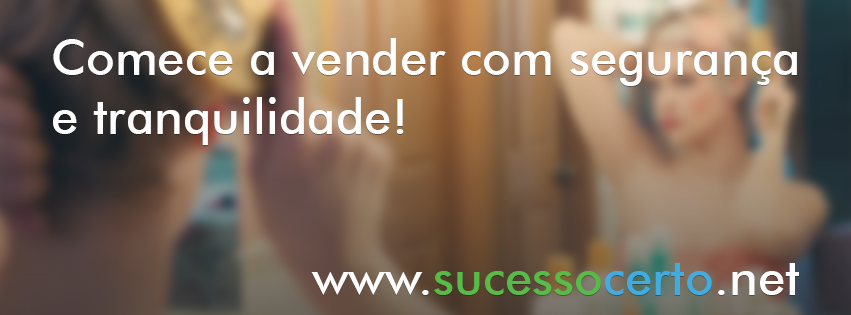
<style>
.page{position:relative;width:851px;height:315px}
.page>*{position:absolute;margin:0}
.t1{font:49px "FuturaBT-Medium";color:#fffefe}
.t2{font:49px "FuturaBT-Medium";color:#58ba47}
.t3{font:49px "FuturaBT-Medium";color:#42abe0}
</style>
<div class="page">
<p class="t1" style="left:53px;top:38px;width:744px;height:107px">Comece a vender com segurança<br>e tranquilidade!</p>
<p class="t2" style="left:311px;top:263px;width:488px;height:32px"><span class="t1">www.</span>sucesso<span class="t3">certo</span><span class="t1">.net</span></p>
</div>
